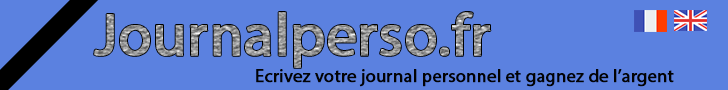
<style>
.page{position:relative;width:728px;height:90px;background:#5b81e0}
.page>*{position:absolute;margin:0}
.t1{font:18px "MyriadPro-Regular";color:#030304;font-weight:bold}
</style>
<div class="page">
<p class="t1" style="left:256px;top:69px;width:418px;height:18px">Ecrivez votre journal personnel et gagnez de l’argent</p>
</div>
